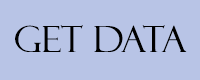
<style>
.page{position:relative;width:200px;height:80px;background:#b8c4e6}
.page>*{position:absolute;margin:0}
.t1{font:36px "FelixTitlingMT";color:#000000}
</style>
<div class="page">
<p class="t1" style="left:15px;top:25px;width:172px;height:27px">get data</p>
</div>
